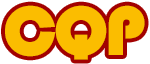
<style>
.page{position:relative;width:150px;height:64px;background:#fbbd00}
.page>*{position:absolute;margin:0}
.t1{font:72px "Bauhaus93";letter-spacing:-0.04em;color:#fbbd00}
</style>
<div class="page">
<p class="t1" style="left:5px;top:5px;width:140px;height:55px">CQP</p>
</div>
